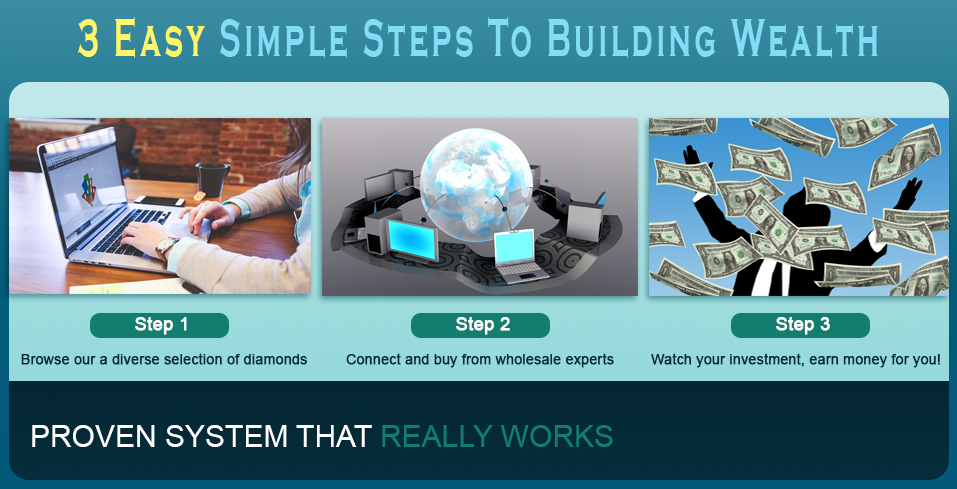
<style>
.page{position:relative;width:957px;height:489px}
.page>*{position:absolute;margin:0}
.t1{font:55.5px "CopperplateGothic-Bold";letter-spacing:0.12em;color:#81dcf5;scale:0.54 1}
.t2{font:55.5px "CopperplateGothic-Bold";letter-spacing:0.12em;color:#fff568;scale:0.54 1}
.t3{font:18px "ArialMT";color:#ffffff;font-weight:bold}
.t4{font:14px "ArialMT";color:#052c39;font-weight:bold}
.t5{font:30px "ArialMT";color:#ffffff}
.t6{font:30px "ArialMT";color:#137d6f}
</style>
<div class="page">
<p class="t1" style="left:78px;top:17px;width:800px;height:41px"><span class="t2">3 Easy </span>Simple Steps To Building Wealth</p>
<p class="t3" style="left:135px;top:317px;width:52px;height:18px">Step 1</p>
<p class="t3" style="left:456px;top:317px;width:54px;height:18px">Step 2</p>
<p class="t3" style="left:776px;top:317px;width:54px;height:18px">Step 3</p>
<p class="t4" style="left:21px;top:353px;width:286px;height:12px">Browse our a diverse selection of diamonds</p>
<p class="t4" style="left:346px;top:353px;width:268px;height:15px">Connect and buy from wholesale experts</p>
<p class="t4" style="left:651px;top:353px;width:289px;height:15px">Watch your investment, earn money for you!</p>
<p class="t5" style="left:32px;top:425px;width:581px;height:22px">PROVEN SYSTEM THAT <span class="t6">REALLY WORKS</span></p>
</div>
